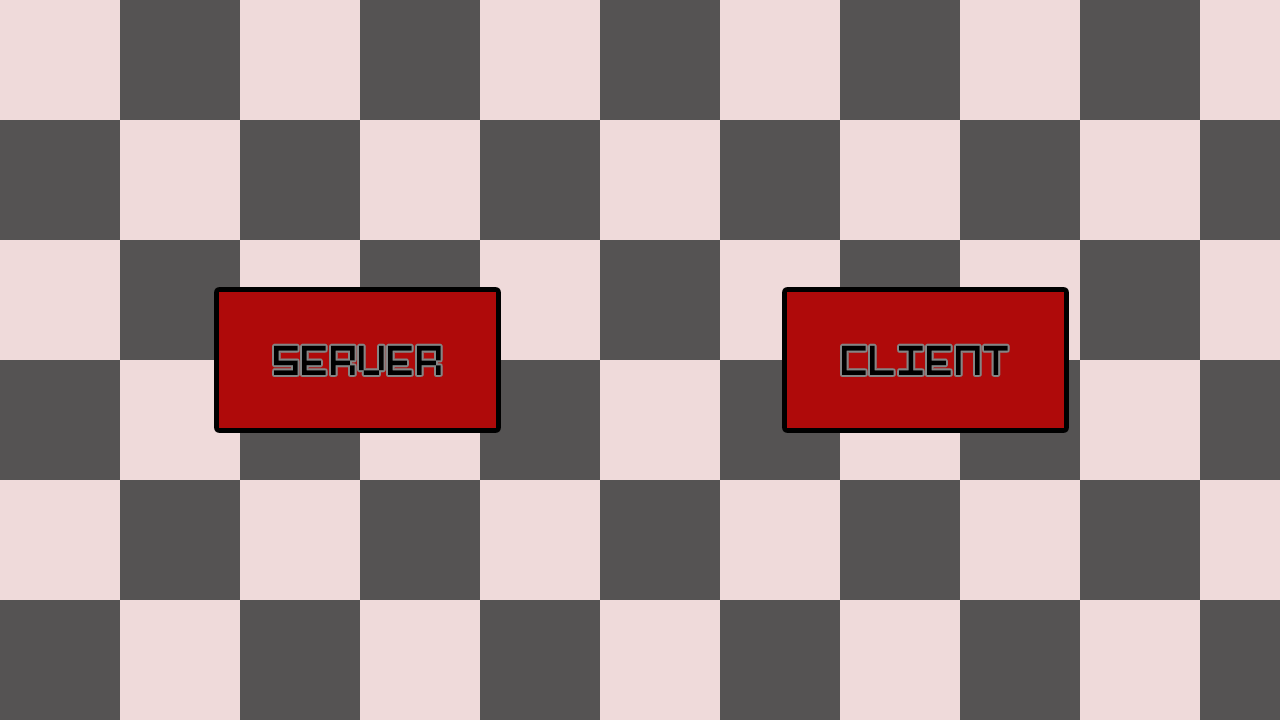
<style>
.page{position:relative;width:1280px;height:720px;background:#efdada}
.page>*{position:absolute;margin:0}
.t1{font:38.9px "Pixel-Art";color:#000000}
</style>
<div class="page">
<p class="t1" style="left:274px;top:345px;width:167px;height:30px">SERVER</p>
<p class="t1" style="left:842px;top:345px;width:166px;height:30px">CLIENT</p>
</div>
